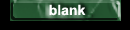
<style>
.page{position:relative;width:130px;height:30px;background:#000000}
.page>*{position:absolute;margin:0}
.t1{font:14px "Arial-BoldMT";color:#fefefe}
</style>
<div class="page">
<p class="t1" style="left:49px;top:4px;width:37px;height:12px">blank</p>
</div>
